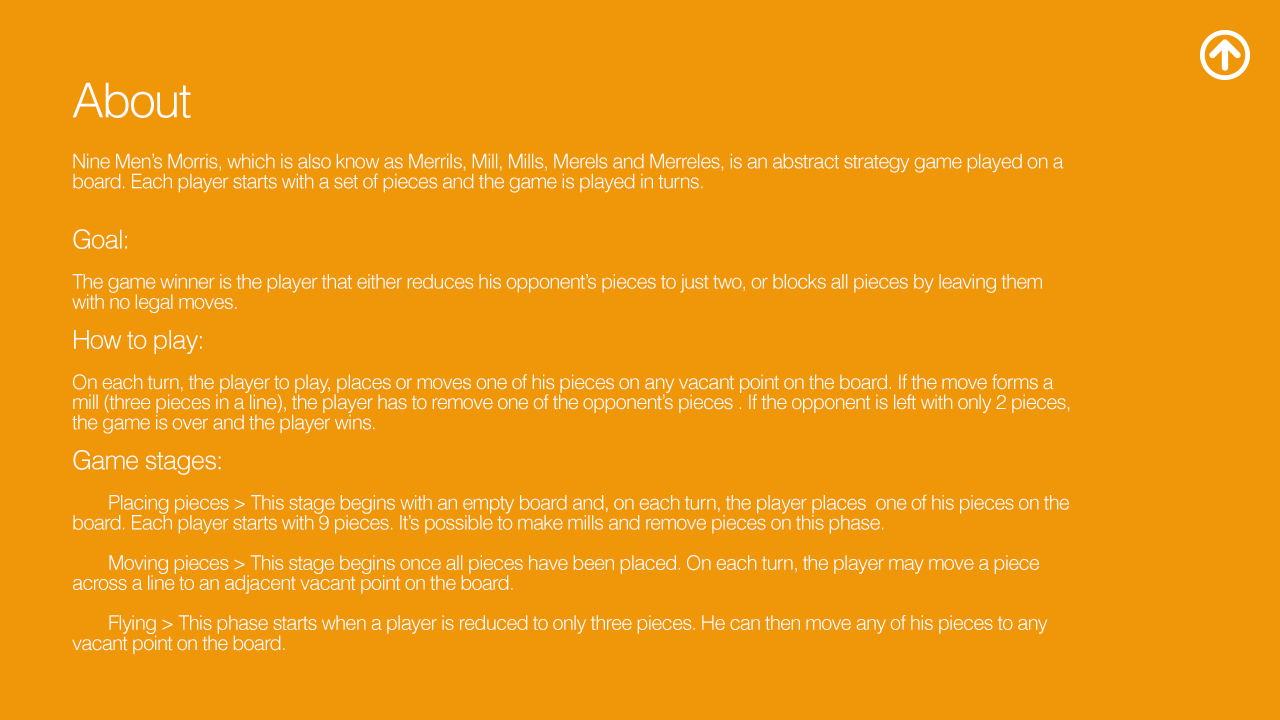
<style>
.page{position:relative;width:1280px;height:720px;background:#f09609}
.page>*{position:absolute;margin:0}
.t1{font:48px "Helvetica-Light";letter-spacing:-0.04em;color:#fffbfb}
.t2{font:20px/20.1px "Helvetica-Light";letter-spacing:-0.04em;color:#fffbfb}
.t3{font:26px/20.1px "Helvetica-Light";letter-spacing:-0.04em;color:#fffbfb}
</style>
<div class="page">
<p class="t1" style="left:72px;top:82px;width:119px;height:36px">About</p>
<p class="t2" style="left:72px;top:153px;width:998px;height:501px">Nine Men’s Morris, which is also know as Merrils, Mill, Mills, Merels and Merreles, is an abstract strategy game played on a board. Each player starts with a set of pieces and the game is played in turns.<br><br><br><span class="t3">Goal:<br></span><br>The game winner is the player that either reduces his opponent’s pieces to just two, or blocks all pieces by leaving them with no legal moves.<br><br><span class="t3">How to play:<br></span><br>On each turn, the player to play, places or moves one of his pieces on any vacant point on the board. If the move forms a mill (three pieces in a line), the player has to remove one of the opponent’s pieces . If the opponent is left with only 2 pieces, the game is over and the player wins.<br><br><span class="t3">Game stages:</span><br><br> Placing pieces &gt; This stage begins with an empty board and, on each turn, the player places  one of his pieces on the board. Each player starts with 9 pieces. It’s possible to make mills and remove pieces on this phase.<br><br> Moving pieces &gt; This stage begins once all pieces have been placed. On each turn, the player may move a piece across a line to an adjacent vacant point on the board.<br><br> Flying &gt; This phase starts when a player is reduced to only three pieces. He can then move any of his pieces to any vacant point on the board.</p>
</div>
